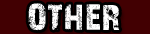
<style>
.page{position:relative;width:150px;height:34px;background:#420002}
.page>*{position:absolute;margin:0}
.t1{font:35.8px "28DaysLater";color:#ffffff}
</style>
<div class="page">
<p class="t1" style="left:28px;top:3px;width:92px;height:28px">OTHER</p>
</div>
